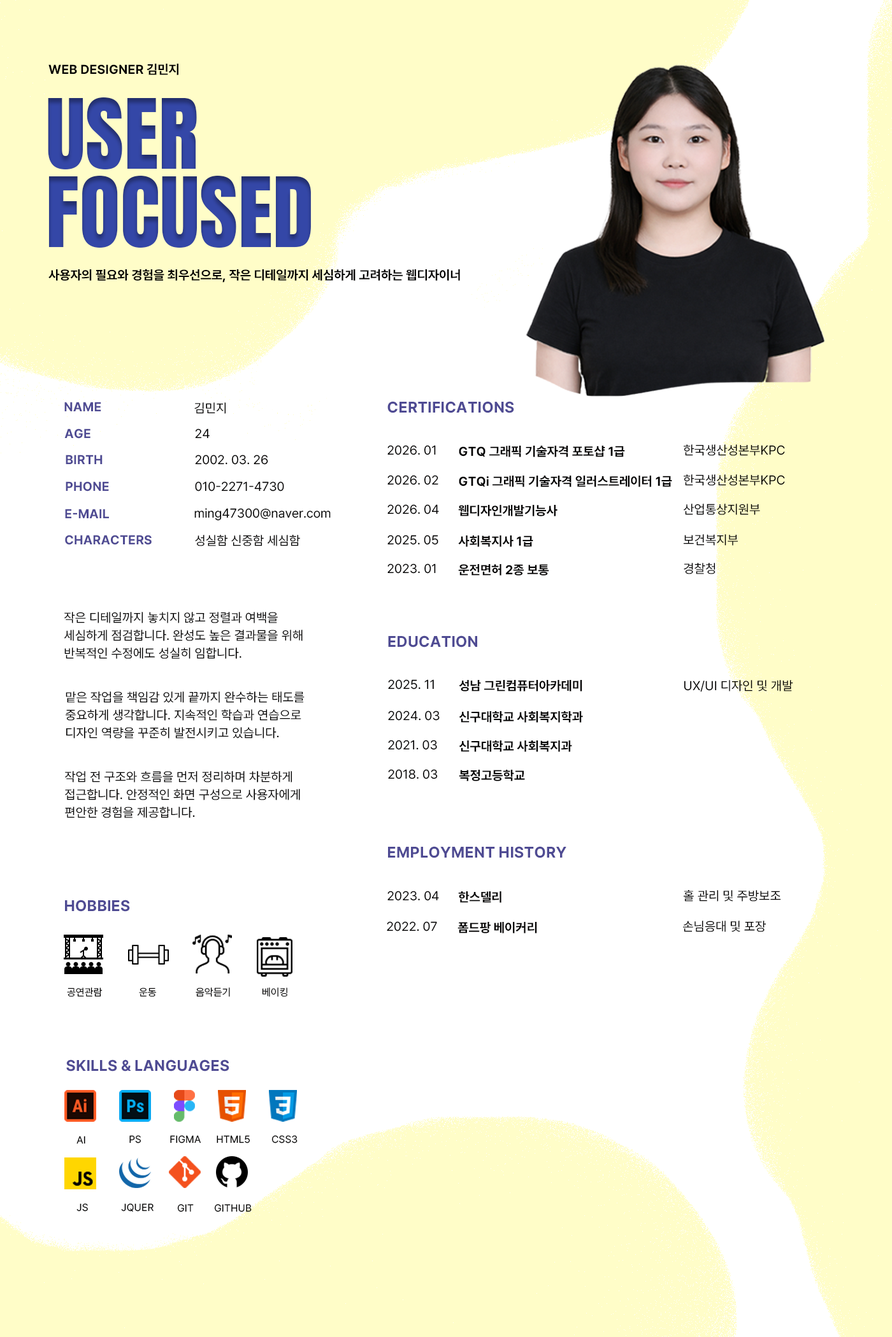
<style>
.page{position:relative;width:892px;height:1337px;background:#ffffff}
.page>*{position:absolute;margin:0}
.t1{font:12.7px "Pretendard-Bold";color:#010000;text-transform:uppercase}
.t2{font:82.8px/78.3px "AntonSC-Regular";color:#3447a7;text-transform:uppercase}
.t3{font:12.7px "Pretendard-Bold";color:#4f4b93;text-transform:uppercase}
.t4{font:15.3px "Pretendard-Bold";color:#4f4b93;text-transform:uppercase}
.t5{font:12.7px "Pretendard-Regular";color:#010000;text-transform:uppercase}
.t6{font:12.7px "Pretendard-Bold";color:#010000}
.t7{font:12.7px "Pretendard-Regular";color:#000000}
.t8{font:12.7px/17.8px "Pretendard-Regular";color:#010000;text-transform:uppercase}
.t9{font:10.2px "Pretendard-Regular";color:#010000;text-transform:uppercase}
</style>
<div class="page">
<p class="t1" style="left:48px;top:64px;width:130px;height:11px">web designer 김민지</p>
<p class="t2" style="left:48px;top:97px;width:263px;height:151px">UseR <br>focused</p>
<p class="t1" style="left:48px;top:269px;width:412px;height:14px">사용자의 필요와 경험을 최우선으로, 작은 디테일까지 세심하게 고려하는 웹디자이너</p>
<p class="t3" style="left:64px;top:402px;width:37px;height:9px">name</p>
<p class="t4" style="left:387px;top:401px;width:127px;height:12px">certifications</p>
<p class="t5" style="left:194px;top:402px;width:32px;height:12px">김민지</p>
<p class="t3" style="left:64px;top:429px;width:26px;height:10px">age</p>
<p class="t5" style="left:195px;top:429px;width:15px;height:10px">24</p>
<p class="t5" style="left:387px;top:445px;width:49px;height:10px">2026. 01</p>
<p class="t1" style="left:459px;top:446px;width:166px;height:11px">gtq 그래픽 기술자격 포토샵 1급</p>
<p class="t5" style="left:683px;top:445px;width:102px;height:11px">한국생산성본부kpc</p>
<p class="t3" style="left:66px;top:455px;width:37px;height:9px">birth</p>
<p class="t5" style="left:195px;top:455px;width:73px;height:10px">2002. 03. 26</p>
<p class="t3" style="left:66px;top:481px;width:43px;height:11px">phone</p>
<p class="t5" style="left:195px;top:481px;width:89px;height:11px">010-2271-4730</p>
<p class="t5" style="left:387px;top:475px;width:51px;height:10px">2026. 02</p>
<p class="t1" style="left:459px;top:476px;width:213px;height:11px">gtq<span class="t6">i</span> 그래픽 기술자격 일러스트레이터 1급</p>
<p class="t5" style="left:683px;top:474px;width:102px;height:12px">한국생산성본부kpc</p>
<p class="t3" style="left:65px;top:509px;width:44px;height:9px">e-mail</p>
<p class="t7" style="left:194px;top:508px;width:137px;height:13px">ming47300@naver.com</p>
<p class="t5" style="left:387px;top:504px;width:52px;height:11px">2026. 04</p>
<p class="t1" style="left:458px;top:505px;width:99px;height:11px">웹디자인개발기능사</p>
<p class="t5" style="left:683px;top:504px;width:77px;height:11px">산업통상지원부</p>
<p class="t3" style="left:65px;top:535px;width:87px;height:10px">characters</p>
<p class="t5" style="left:195px;top:534px;width:105px;height:12px">성실함 신중함 세심함</p>
<p class="t5" style="left:387px;top:535px;width:51px;height:10px">2025. 05</p>
<p class="t1" style="left:458px;top:536px;width:75px;height:11px">사회복지사 1급</p>
<p class="t5" style="left:683px;top:534px;width:54px;height:12px">보건복지부</p>
<p class="t5" style="left:387px;top:564px;width:49px;height:10px">2023. 01</p>
<p class="t1" style="left:458px;top:564px;width:91px;height:12px">운전면허 2종 보통</p>
<p class="t5" style="left:683px;top:563px;width:32px;height:11px">경찰청</p>
<p class="t8" style="left:64px;top:612px;width:239px;height:47px">작은 디테일까지 놓치지 않고 정렬과 여백을 세심하게 점검합니다. 완성도 높은 결과물을 위해 반복적인 수정에도 성실히 임합니다.</p>
<p class="t4" style="left:388px;top:636px;width:89px;height:12px">education</p>
<p class="t5" style="left:388px;top:680px;width:46px;height:10px">2025. 11</p>
<p class="t1" style="left:459px;top:680px;width:123px;height:12px">성남 그린컴퓨터아카데미</p>
<p class="t5" style="left:683px;top:680px;width:110px;height:12px">UX/UI 디자인 및 개발</p>
<p class="t8" style="left:66px;top:692px;width:238px;height:47px">맡은 작업을 책임감 있게 끝까지 완수하는 태도를 중요하게 생각합니다. 지속적인 학습과 연습으로 디자인 역량을 꾸준히 발전시키고 있습니다.</p>
<p class="t5" style="left:388px;top:711px;width:51px;height:10px">2024. 03</p>
<p class="t1" style="left:459px;top:711px;width:124px;height:12px">신구대학교 사회복지학과</p>
<p class="t5" style="left:388px;top:740px;width:49px;height:10px">2021. 03</p>
<p class="t1" style="left:459px;top:741px;width:113px;height:11px">신구대학교 사회복지과</p>
<p class="t8" style="left:65px;top:771px;width:235px;height:47px">작업 전 구조와 흐름을 먼저 정리하며 차분하게 접근합니다. 안정적인 화면 구성으로 사용자에게 편안한 경험을 제공합니다.</p>
<p class="t5" style="left:388px;top:769px;width:50px;height:11px">2018. 03</p>
<p class="t1" style="left:459px;top:770px;width:66px;height:11px">복정고등학교</p>
<p class="t4" style="left:388px;top:846px;width:178px;height:12px">Employment History</p>
<p class="t5" style="left:387px;top:891px;width:52px;height:10px">2023. 04</p>
<p class="t1" style="left:458px;top:892px;width:43px;height:11px">한스델리</p>
<p class="t5" style="left:683px;top:890px;width:98px;height:12px">홀 관리 및 주방보조</p>
<p class="t4" style="left:65px;top:900px;width:65px;height:12px">Hobbies</p>
<p class="t5" style="left:387px;top:922px;width:50px;height:10px">2022. 07</p>
<p class="t1" style="left:457px;top:922px;width:80px;height:12px">폼드팡 베이커리</p>
<p class="t5" style="left:683px;top:921px;width:83px;height:11px">손님응대 및 포장</p>
<p class="t9" style="left:67px;top:988px;width:36px;height:9px">공연관람</p>
<p class="t9" style="left:139px;top:988px;width:18px;height:9px">운동</p>
<p class="t9" style="left:196px;top:988px;width:34px;height:9px">음악듣기</p>
<p class="t9" style="left:262px;top:988px;width:25px;height:9px">베이킹</p>
<p class="t4" style="left:66px;top:1060px;width:163px;height:12px">skills &amp; languages</p>
<p class="t9" style="left:76px;top:1136px;width:9px;height:8px">AI</p>
<p class="t9" style="left:129px;top:1136px;width:12px;height:8px">PS</p>
<p class="t9" style="left:170px;top:1136px;width:31px;height:8px">figma</p>
<p class="t9" style="left:217px;top:1136px;width:33px;height:8px">html5</p>
<p class="t9" style="left:271px;top:1136px;width:26px;height:8px">css3</p>
<p class="t9" style="left:76px;top:1204px;width:12px;height:8px">js</p>
<p class="t9" style="left:121px;top:1204px;width:32px;height:9px">jquer</p>
<p class="t9" style="left:177px;top:1204px;width:17px;height:9px">git</p>
<p class="t9" style="left:214px;top:1204px;width:38px;height:9px">github</p>
</div>
